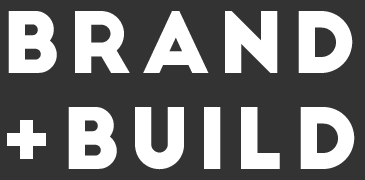
<style>
.page{position:relative;width:365px;height:180px;background:#333333}
.page>*{position:absolute;margin:0}
.t1{font:82.3px/95.2px "BigJohn";letter-spacing:0.1em;color:#ffffff;text-transform:uppercase}
</style>
<div class="page">
<p class="t1" style="left:7px;top:11px;width:348px;height:159px;text-align:center">brand<br>+build</p>
</div>
